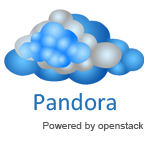
<style>
.page{position:relative;width:150px;height:141px;background:#ffffff}
.page>*{position:absolute;margin:0}
.t1{font:25px "Calibri";color:#2271b7}
.t2{font:10px "ArialMT";color:#5d5d5d}
</style>
<div class="page">
<p class="t1" style="left:34px;top:92px;width:82px;height:19px">Pandora</p>
<p class="t2" style="left:43px;top:122px;width:101px;height:9px">Powered by openstack</p>
</div>
